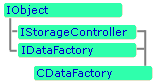
<style>
.page{position:relative;width:157px;height:84px;background:#2fffac}
.page>*{position:absolute;margin:0}
.t1{font:11px "Verdana";color:#0000cc}
</style>
<div class="page">
<p class="t1" style="left:7px;top:5px;width:41px;height:11px">IObject</p>
<p class="t1" style="left:21px;top:27px;width:106px;height:11px">IStorageController</p>
<p class="t1" style="left:22px;top:46px;width:71px;height:10px">IDataFactory</p>
<p class="t1" style="left:37px;top:69px;width:75px;height:10px">CDataFactory</p>
</div>
